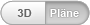
<style>
.page{position:relative;width:90px;height:25px}
.page>*{position:absolute;margin:0}
.t1{font:11px "Arial-BoldMT";color:#666666}
.t2{font:11px "Arial-BoldMT";color:#ffffff}
</style>
<div class="page">
<p class="t1" style="left:17px;top:9px;width:15px;height:8px">3D</p>
<p class="t2" style="left:50px;top:9px;width:29px;height:8px">Pläne</p>
</div>
